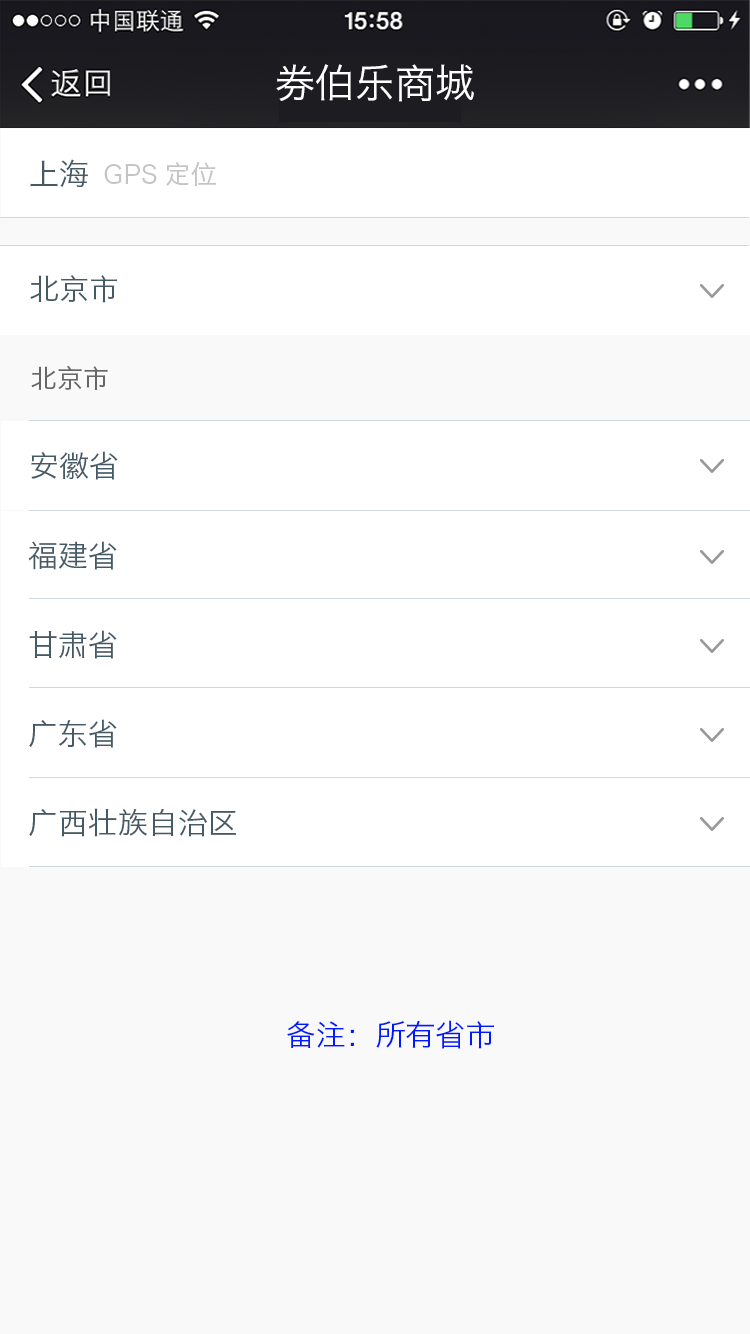
<style>
.page{position:relative;width:750px;height:1334px;background:#ffffff}
.page>*{position:absolute;margin:0}
.t1{font:40px "HiraginoSansGB-W3";color:#ffffff}
.t2{font:30px "HiraginoSansGB-W3";color:#455a64}
.t3{font:26px "HiraginoSansGB-W3";color:#c4c4c4}
.t4{font:26px "HiraginoSansGB-W3";color:#666666}
.t5{font:30px "HiraginoSansGB-W3";color:#0018ff}
</style>
<div class="page">
<p class="t1" style="left:276px;top:64px;width:198px;height:38px">券伯乐商城</p>
<p class="t2" style="left:30px;top:159px;width:58px;height:28px">上海</p>
<p class="t3" style="left:104px;top:162px;width:112px;height:25px">GPS定位</p>
<p class="t2" style="left:30px;top:275px;width:87px;height:28px">北京市</p>
<p class="t4" style="left:31px;top:365px;width:77px;height:25px">北京市</p>
<p class="t2" style="left:31px;top:451px;width:87px;height:29px">安徽省</p>
<p class="t2" style="left:28px;top:541px;width:89px;height:29px">福建省</p>
<p class="t2" style="left:29px;top:630px;width:88px;height:29px">甘肃省</p>
<p class="t2" style="left:29px;top:719px;width:88px;height:29px">广东省</p>
<p class="t2" style="left:29px;top:808px;width:207px;height:29px">广西壮族自治区</p>
<p class="t5" style="left:287px;top:1020px;width:207px;height:29px">备注：所有省市</p>
</div>
